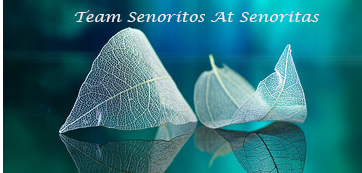
<style>
.page{position:relative;width:362px;height:173px}
.page>*{position:absolute;margin:0}
.t1{font:14.4px "LucidaCalligraphy-Italic";color:#f5ebed;scale:1.12 1}
</style>
<div class="page">
<p class="t1" style="left:74px;top:10px;width:245px;height:12px">Team Senoritos At Senoritas</p>
</div>
